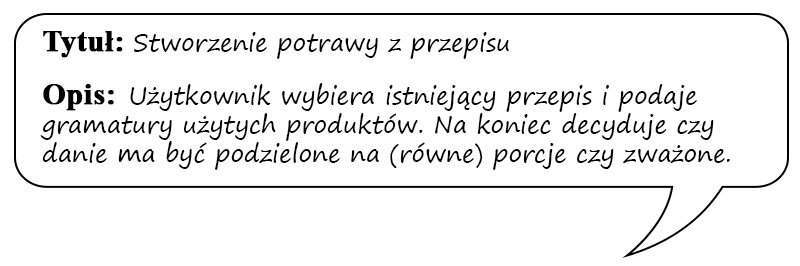
<style>
.page{position:relative;width:800px;height:266px;background:#ffffff}
.page>*{position:absolute;margin:0}
.t1{font:24px "SegoePrint";color:#000000}
.t2{font:30px "TimesNewRomanPS-BoldMT";color:#000000;font-weight:bold}
</style>
<div class="page">
<p class="t1" style="left:40px;top:31px;width:690px;height:139px"><span class="t2">Tytuł: </span>Stworzenie potrawy z przepisu<br><br><span class="t2">Opis:  </span>Użytkownik wybiera istniejący przepis i podaje gramatury użytych produktów. Na koniec decyduje czy danie ma być podzielone na (równe) porcje czy zważone.</p>
</div>
